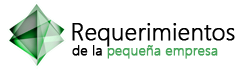
<style>
.page{position:relative;width:250px;height:70px;background:#ffffff}
.page>*{position:absolute;margin:0}
.t1{font:24px "SegoeUI-Light";color:#000000;font-weight:bold}
.t2{font:14px "SegoeUI-Light";color:#48a65b;font-weight:bold}
.t3{font:14px "SegoeUI-Light";color:#000000;font-weight:bold}
</style>
<div class="page">
<p class="t1" style="left:72px;top:23px;width:163px;height:24px">Requerimientos</p>
<p class="t2" style="left:72px;top:45px;width:146px;height:14px"><span class="t3">de la </span>pequeña empresa</p>
</div>
